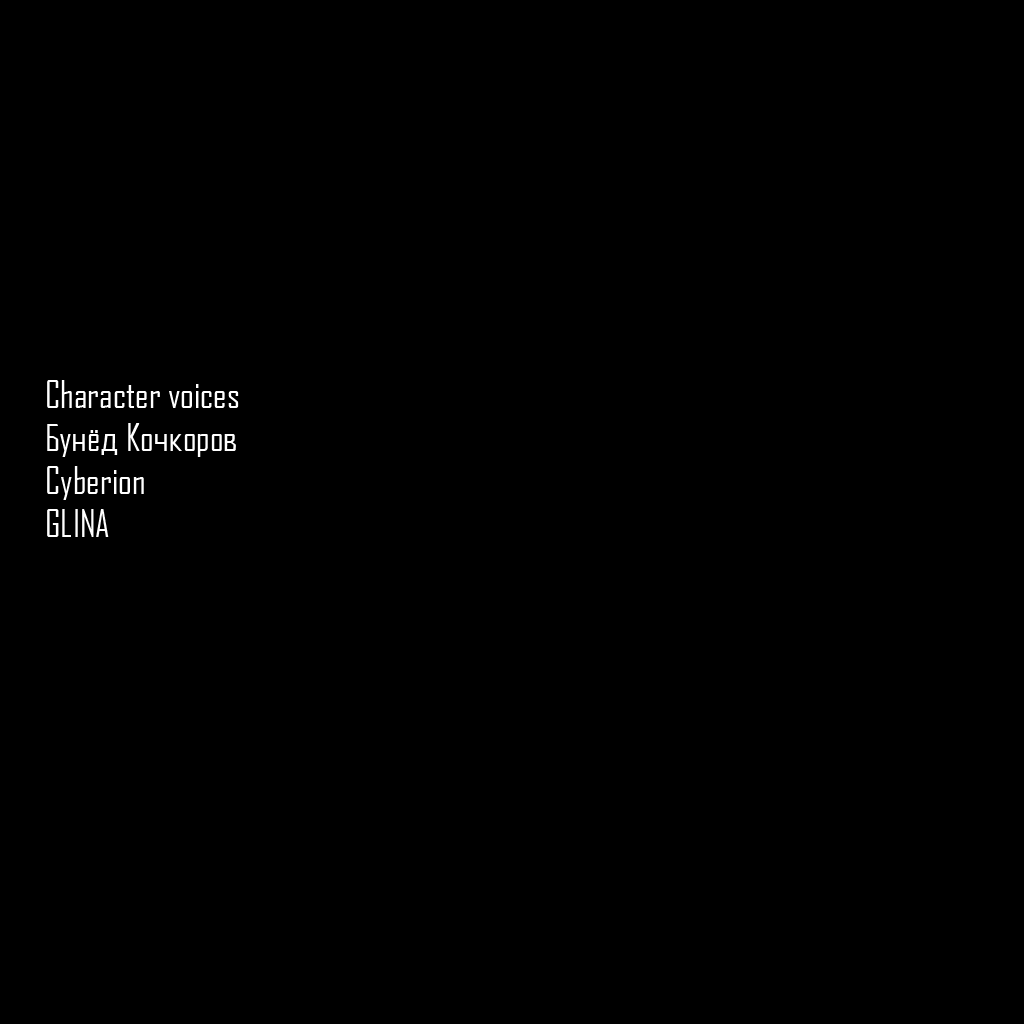
<style>
.page{position:relative;width:1024px;height:1024px;background:#000000}
.page>*{position:absolute;margin:0}
.t1{font:36px "AgencyFBCyrillic";color:#ffffff}
</style>
<div class="page">
<p class="t1" style="left:47px;top:380px;width:192px;height:157px">Character voices<br>Бунёд Кочкоров<br>Cyberion<br>GLINA</p>
</div>
